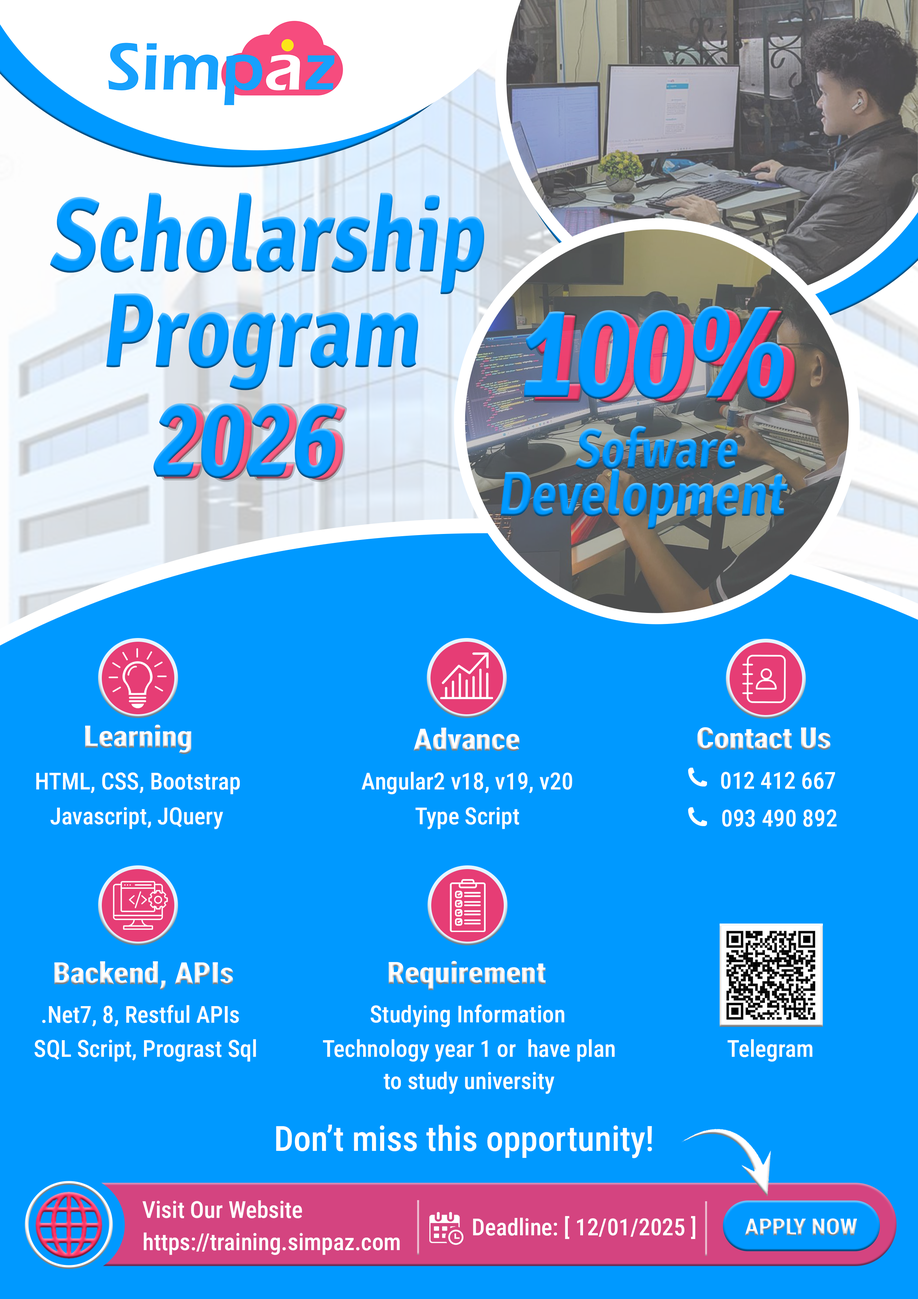
<style>
.page{position:relative;width:918px;height:1299px;background:#0099ff}
.page>*{position:absolute;margin:0}
.t1{font:100.3px "Romnea-Italic";color:#0099ff;scale:0.8 1}
.t2{font:118.8px "Romnea-Italic";color:#0099ff;scale:0.8 1}
.t3{font:118.8px "Romnea-Italic";scale:0.8 1}
.t4{font:100.3px "Romnea-Italic";scale:0.8 1}
.t5{font:53.5px "Romnea-Italic";scale:0.8 1}
.t6{font:59.5px "Romnea-Italic";color:#0099ff;scale:0.8 1}
.t7{font:30.9px "Roboto-CondensedBlack";color:#ffffff}
.t8{font:23.4px "Roboto-CondensedMedium";color:#ffffff}
.t9{font:23.4px/32.4px "Roboto-CondensedMedium";color:#ffffff}
.t10{font:34.8px "Roboto-CondensedMedium";color:#ffffff}
.t11{font:23.4px "Roboto-CondensedBold";color:#ffffff}
</style>
<div class="page">
<p class="t1" style="left:50px;top:193px;width:435px;height:101px">Scholarship</p>
<p class="t1" style="left:106px;top:293px;width:312px;height:97px">Program</p>
<p class="t2" style="left:524px;top:306px;width:260px;height:93px">100%</p>
<p class="t3" style="left:535px;top:310px;width:260px;height:93px">100%</p>
<p class="t1" style="left:153px;top:403px;width:185px;height:75px">2026</p>
<p class="t4" style="left:161px;top:405px;width:184px;height:75px">2026</p>
<p class="t5" style="left:575px;top:426px;width:163px;height:43px">Sofware</p>
<p class="t6" style="left:501px;top:469px;width:287px;height:60px">Development</p>
<p class="t7" style="left:85px;top:725px;width:106px;height:29px">Learning</p>
<p class="t7" style="left:414px;top:727px;width:106px;height:24px">Advance</p>
<p class="t7" style="left:697px;top:727px;width:134px;height:23px">Contact Us</p>
<p class="t8" style="left:36px;top:772px;width:204px;height:22px">HTML, CSS, Bootstrap</p>
<p class="t8" style="left:362px;top:772px;width:210px;height:22px">Angular2 v18, v19, v20</p>
<p class="t8" style="left:721px;top:772px;width:114px;height:17px">012 412 667</p>
<p class="t8" style="left:50px;top:807px;width:173px;height:22px">Javascript, JQuery</p>
<p class="t8" style="left:415px;top:807px;width:104px;height:22px">Type Script</p>
<p class="t8" style="left:722px;top:809px;width:115px;height:18px">093 490 892</p>
<p class="t7" style="left:54px;top:961px;width:179px;height:29px">Backend, APIs</p>
<p class="t7" style="left:389px;top:961px;width:157px;height:29px">Requirement</p>
<p class="t8" style="left:42px;top:1004px;width:197px;height:22px">.Net7, 8, Restful APIs</p>
<p class="t8" style="left:371px;top:1004px;width:194px;height:23px">Studying Information</p>
<p class="t8" style="left:34px;top:1039px;width:222px;height:22px">SQL Script, Prograst Sql</p>
<p class="t9" style="left:323px;top:1039px;width:292px;height:55px;text-align:center">Technology year 1 or  have plan<br>to study university</p>
<p class="t8" style="left:727px;top:1039px;width:86px;height:22px">Telegram</p>
<p class="t10" style="left:276px;top:1124px;width:376px;height:34px">Don’t miss this opportunity!</p>
<p class="t8" style="left:143px;top:1200px;width:159px;height:18px">Visit Our Website</p>
<p class="t8" style="left:473px;top:1216px;width:223px;height:23px">Deadline: [ 12/01/2025 ]</p>
<p class="t11" style="left:745px;top:1218px;width:112px;height:17px">APPLY NOW</p>
<p class="t8" style="left:144px;top:1232px;width:256px;height:23px">https://training.simpaz.com</p>
</div>
